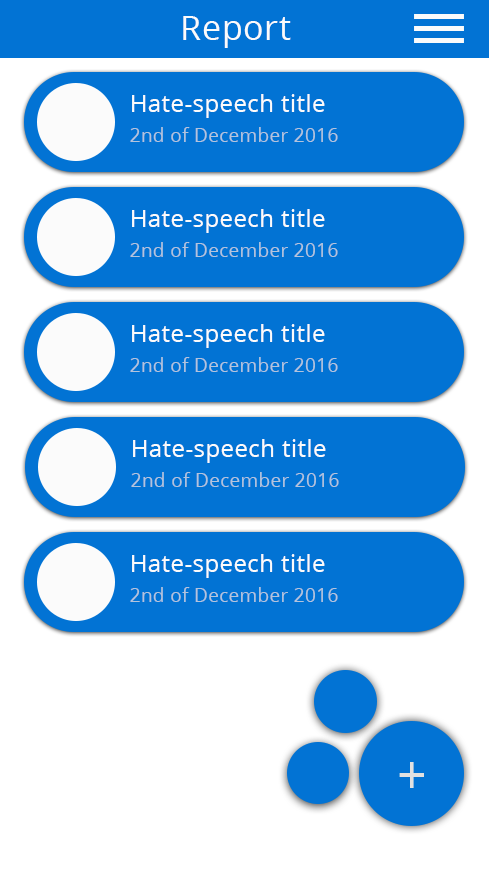
<style>
.page{position:relative;width:489px;height:886px;background:#0273d4}
.page>*{position:absolute;margin:0}
.t1{font:33.9px "OpenSans";letter-spacing:0.02em;color:#fbfbfb}
.t2{font:23.9px "OpenSans";letter-spacing:0.02em;color:#fbfbfb}
.t3{font:18.9px "OpenSans";letter-spacing:0.02em;color:#b3c4dd}
</style>
<div class="page">
<p class="t1" style="left:183px;top:16px;width:108px;height:32px">Report</p>
<p class="t2" style="left:132px;top:94px;width:193px;height:24px">Hate-speech title</p>
<p class="t3" style="left:130px;top:127px;width:208px;height:15px">2nd of December 2016</p>
<p class="t2" style="left:132px;top:209px;width:193px;height:24px">Hate-speech title</p>
<p class="t3" style="left:130px;top:242px;width:208px;height:15px">2nd of December 2016</p>
<p class="t2" style="left:132px;top:324px;width:193px;height:24px">Hate-speech title</p>
<p class="t3" style="left:130px;top:357px;width:208px;height:15px">2nd of December 2016</p>
<p class="t2" style="left:133px;top:439px;width:193px;height:24px">Hate-speech title</p>
<p class="t3" style="left:131px;top:472px;width:208px;height:15px">2nd of December 2016</p>
<p class="t2" style="left:132px;top:554px;width:193px;height:24px">Hate-speech title</p>
<p class="t3" style="left:130px;top:587px;width:208px;height:15px">2nd of December 2016</p>
</div>
